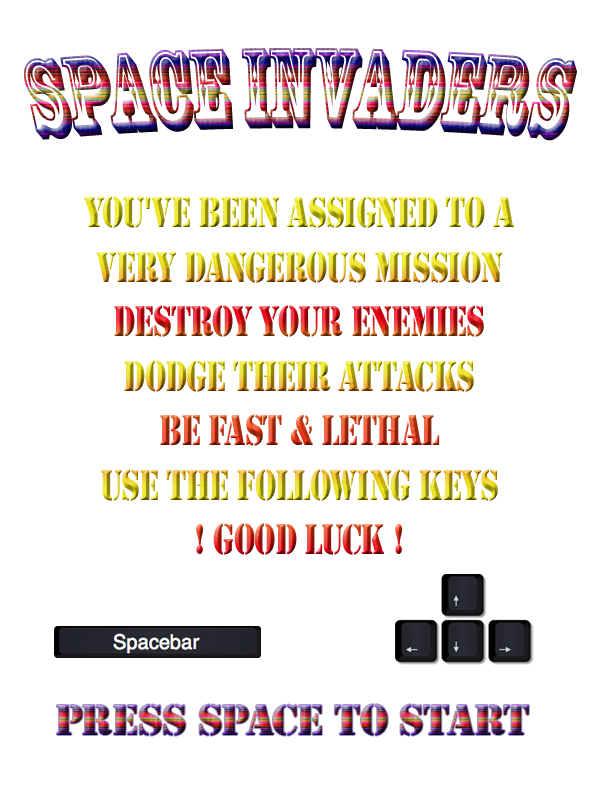
<style>
.page{position:relative;width:600px;height:800px;background:#ffffff}
.page>*{position:absolute;margin:0}
.t1{font:106.3px "RosewoodStd-Regular";letter-spacing:-0.01em;scale:0.63 1}
.t2{font:45.4px "Stencil";letter-spacing:-0.01em;scale:0.74 1}
.t3{font:45.4px "Stencil";letter-spacing:-0.01em}
</style>
<div class="page">
<p class="t1" style="left:24px;top:48px;width:553px;height:93px">Space Invaders</p>
<p class="t2" style="left:84px;top:196px;width:430px;height:359px;text-align:center">You've been assigned to a<br><br>Very dangerous mission<br><br>Destroy your enemies<br><br>Dodge their attacks<br><br>be fast &amp; lethal<br><br>Use the following keys<br><br>! Good luck !</p>
<p class="t3" style="left:56px;top:704px;width:473px;height:32px">press space to start</p>
</div>
